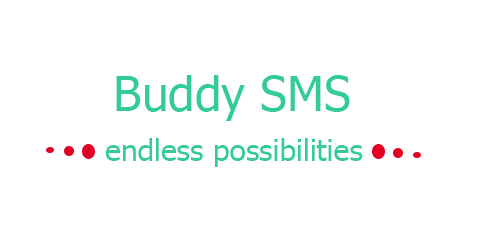
<style>
.page{position:relative;width:500px;height:250px;background:#ffffff}
.page>*{position:absolute;margin:0}
.t1{font:48px "Tahoma";color:#33cc99}
.t2{font:30px "Tahoma";color:#33cc99}
</style>
<div class="page">
<p class="t1" style="left:116px;top:75px;width:234px;height:46px">Buddy SMS</p>
<p class="t2" style="left:105px;top:138px;width:258px;height:29px">endless possibilities</p>
</div>
